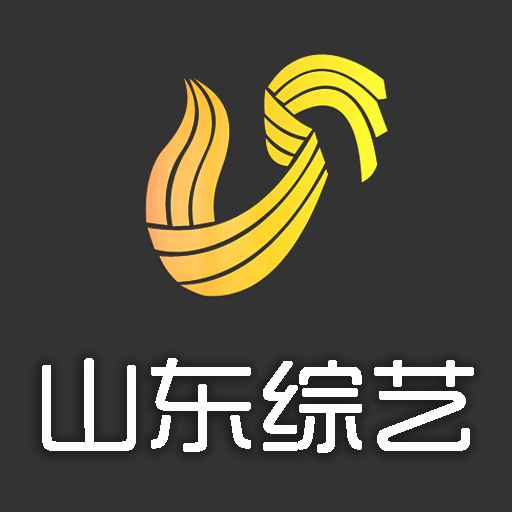
<style>
.page{position:relative;width:512px;height:512px;background:#333333}
.page>*{position:absolute;margin:0}
.t1{font:106.7px "SJshishang-Regular";letter-spacing:0.02em;color:#fcfdfd;font-weight:bold}
</style>
<div class="page">
<p class="t1" style="left:42px;top:358px;width:432px;height:95px">山东综艺</p>
</div>
